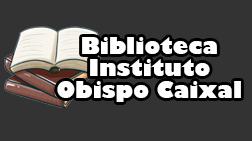
<style>
.page{position:relative;width:252px;height:141px;background:#333333}
.page>*{position:absolute;margin:0}
.t1{font:22.1px/22.1px "GillSans-UltraBold";color:#fefefe}
</style>
<div class="page">
<p class="t1" style="left:57px;top:37px;width:184px;height:65px;text-align:center">Biblioteca<br>Instituto<br>Obispo Caixal</p>
</div>
